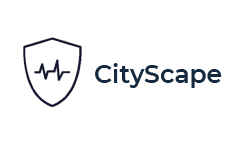
<style>
.page{position:relative;width:250px;height:148px;background:#ffffff}
.page>*{position:absolute;margin:0}
.t1{font:25px "Montserrat-SemiBold";color:#152a3f}
</style>
<div class="page">
<p class="t1" style="left:95px;top:63px;width:127px;height:25px">CityScape</p>
</div>
